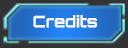
<style>
.page{position:relative;width:128px;height:48px;background:#333333}
.page>*{position:absolute;margin:0}
.t1{font:15.8px "Orbitron-Bold";color:#ffffff}
</style>
<div class="page">
<p class="t1" style="left:33px;top:15px;width:64px;height:13px">Credits</p>
</div>
